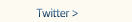
<style>
.page{position:relative;width:132px;height:22px;background:#fdfaf2}
.page>*{position:absolute;margin:0}
.t1{font:13px "Calibri";letter-spacing:-0.04em;scale:0.94 1}
</style>
<div class="page">
<p class="t1" style="left:36px;top:8px;width:34px;height:9px">Twitter</p>
<p class="t1" style="left:72px;top:10px;width:6px;height:7px">&gt;</p>
</div>
